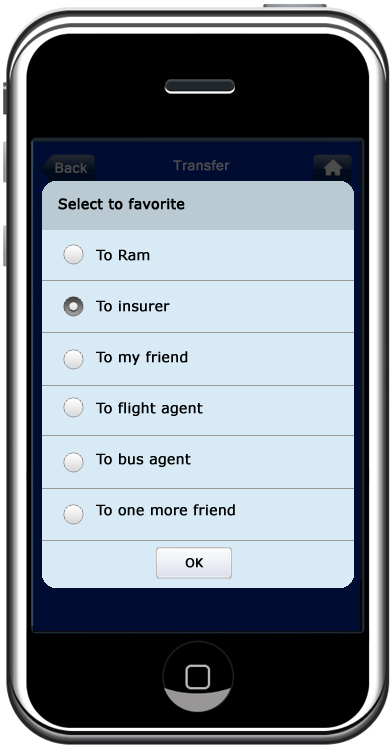
<style>
.page{position:relative;width:390px;height:747px;background:#d8eaf5}
.page>*{position:absolute;margin:0}
.t1{font:18px "Tunga";color:#4c4c4c;font-weight:bold}
.t2{font:14px "Verdana";color:#000000;font-weight:bold}
.t3{font:14px/51px "Verdana";color:#000000;font-weight:bold}
.t4{font:12px "Verdana";color:#000000;font-weight:bold}
</style>
<div class="page">
<p class="t1" style="left:173px;top:160px;width:57px;height:11px">Transfer</p>
<p class="t1" style="left:55px;top:162px;width:33px;height:11px">Back</p>
<p class="t2" style="left:58px;top:198px;width:127px;height:12px">Select to favorite</p>
<p class="t3" style="left:96px;top:249px;width:139px;height:267px">To Ram<br>To insurer<br>To my friend<br>To flight agent<br>To bus agent<br>To one more friend</p>
<p class="t4" style="left:185px;top:558px;width:19px;height:10px">OK</p>
</div>
